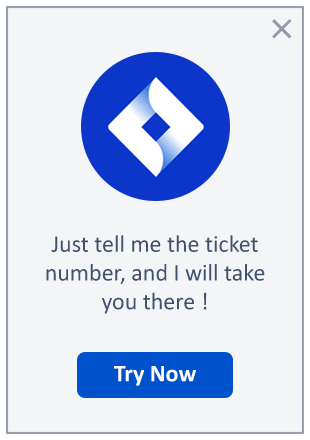
<style>
.page{position:relative;width:310px;height:440px;background:#f4f5f7}
.page>*{position:absolute;margin:0}
.t1{font:24px "Calibri-Regular";color:#42526e}
.t2{font:24px "Calibri-Bold";color:#ffffff}
</style>
<div class="page">
<p class="t1" style="left:46px;top:235px;width:219px;height:79px;text-align:center">Just tell me the ticket number, and I will take you there !</p>
<p class="t2" style="left:114px;top:366px;width:82px;height:20px">Try Now</p>
</div>
